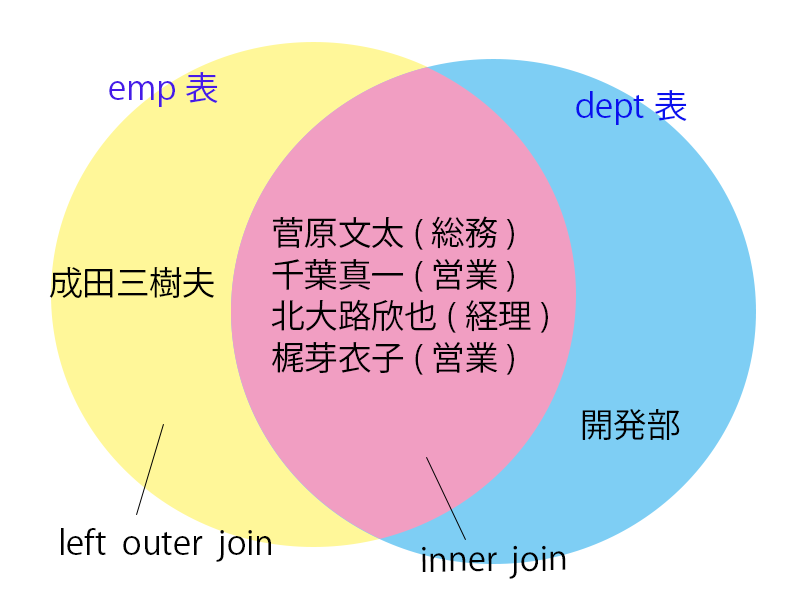
<style>
.page{position:relative;width:800px;height:600px;background:#ffffff}
.page>*{position:absolute;margin:0}
.t1{font:33.3px "KozGoPr6N-Regular";color:#461ae8}
.t2{font:33.3px "KozGoPr6N-Regular";color:#0a10ee}
.t3{font:33.3px/41.7px "KozGoPr6N-Regular";color:#000000}
.t4{font:33.3px "KozGoPr6N-Regular";color:#000000}
</style>
<div class="page">
<p class="t1" style="left:109px;top:72px;width:109px;height:35px">emp表</p>
<p class="t2" style="left:576px;top:90px;width:111px;height:35px">dept表</p>
<p class="t3" style="left:271px;top:216px;width:277px;height:159px">菅原文太(総務)<br>千葉真一(営業)<br>北大路欣也(経理)<br>梶芽衣子(営業)</p>
<p class="t4" style="left:49px;top:266px;width:165px;height:32px">成田三樹夫</p>
<p class="t4" style="left:582px;top:409px;width:98px;height:31px">開発部</p>
<p class="t4" style="left:61px;top:528px;width:210px;height:34px">left  outer  join</p>
<p class="t4" style="left:422px;top:545px;width:144px;height:34px;rotate:-1deg">inner join</p>
</div>
